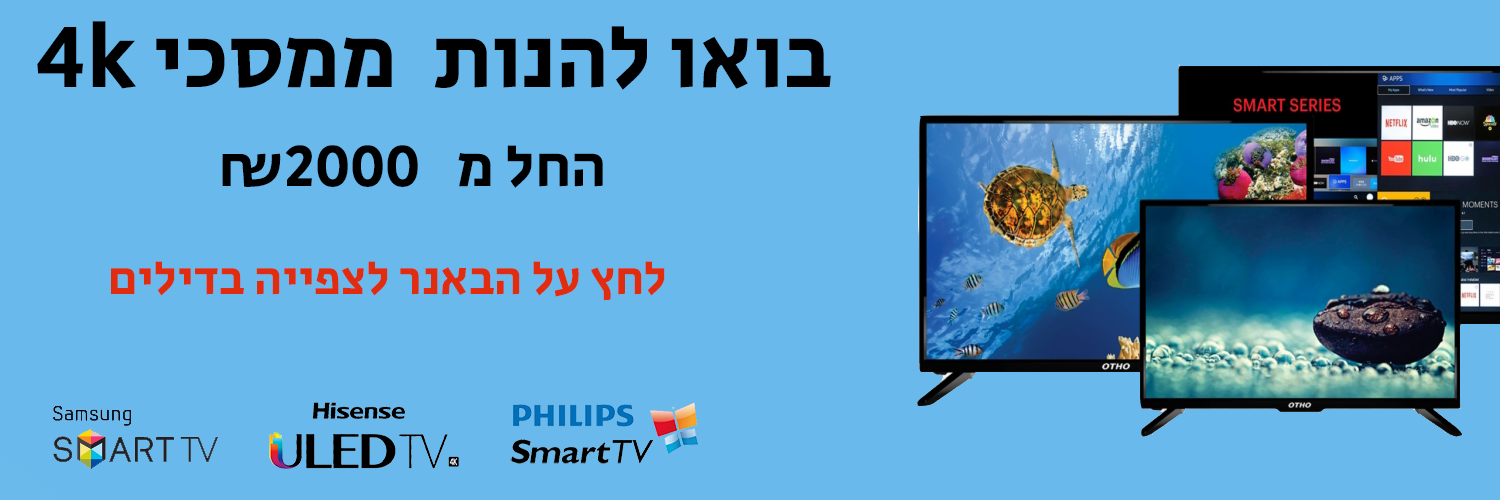
<style>
.page{position:relative;width:1500px;height:500px;background:#69b9ec}
.page>*{position:absolute;margin:0}
.t1{font:90px "SecularOne-Regular";color:#000000}
.t2{font:60px "SecularOne-Regular";color:#000000}
.t3{font:48px "SecularOne-Regular";color:#e02d10}
</style>
<div class="page">
<p class="t1" style="left:37px;top:21px;width:794px;height:69px">4k בואו להנות  ממסכי</p>
<p class="t2" style="left:222px;top:145px;width:381px;height:43px">החל מ   ₪2000</p>
<p class="t3" style="left:111px;top:261px;width:554px;height:40px">לחץ על הבאנר לצפייה בדילים</p>
</div>
